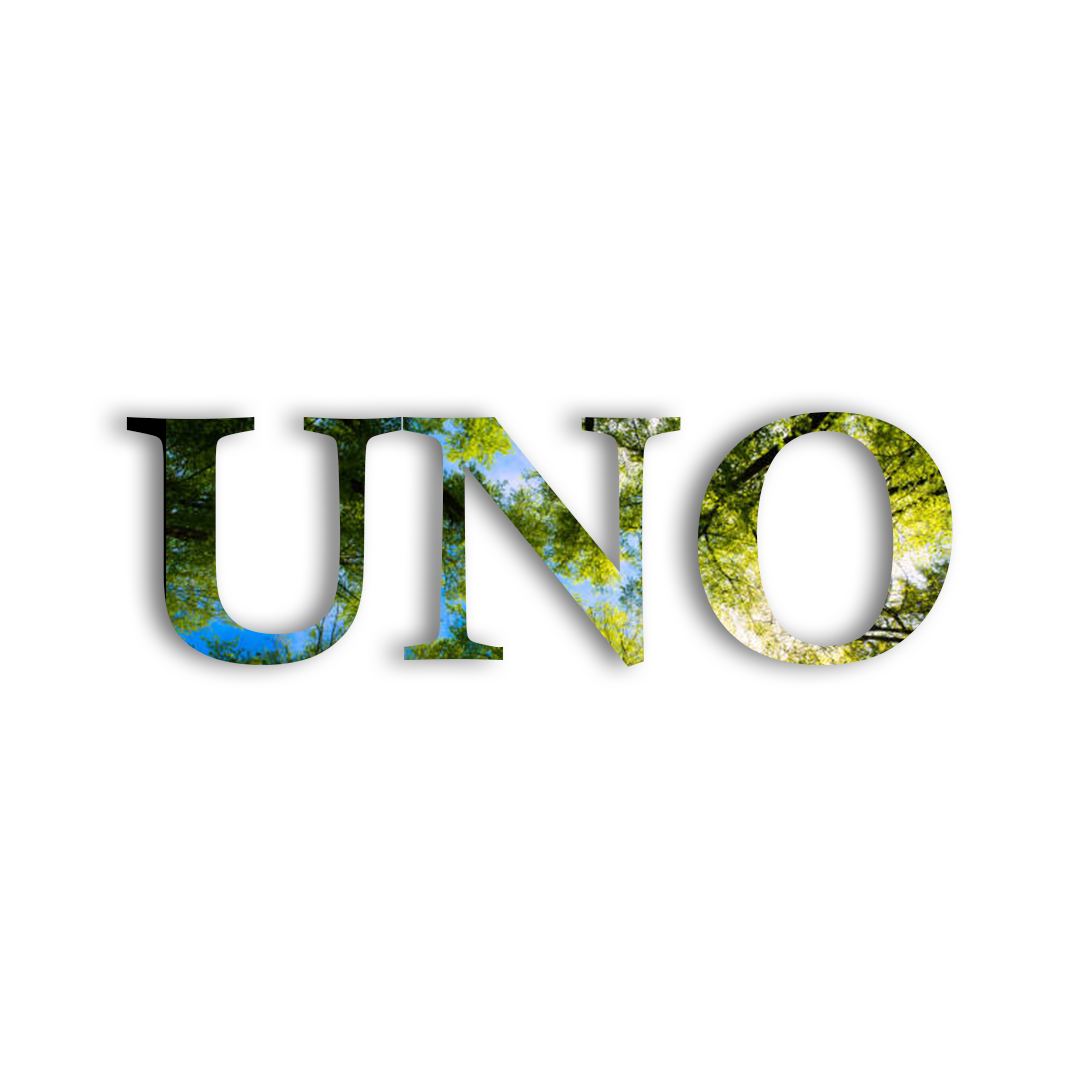
<style>
.page{position:relative;width:1080px;height:1080px;background:#ffffff}
.page>*{position:absolute;margin:0}
.t1{font:350px "CalisMTBol"}
</style>
<div class="page">
<p class="t1" style="left:126px;top:412px;width:827px;height:255px">UNO</p>
</div>
